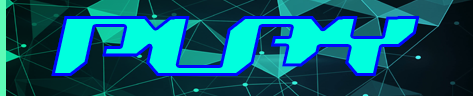
<style>
.page{position:relative;width:473px;height:96px}
.page>*{position:absolute;margin:0}
.t1{font:59.3px "BionicKidSimpleSlanted";letter-spacing:-0.06em;color:#00ffde;font-weight:bold;scale:1.04 1}
</style>
<div class="page">
<p class="t1" style="left:51px;top:16px;width:369px;height:60px">PLAY</p>
</div>
